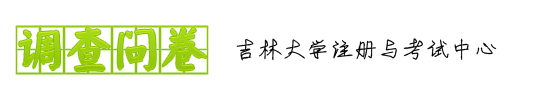
<style>
.page{position:relative;width:535px;height:100px;background:#ffffff}
.page>*{position:absolute;margin:0}
.t1{font:48px "YankaigungEG-Ultra-GB";color:#9fd20f}
.t2{font:24px "SheideEG-Medium-GB";color:#010000}
</style>
<div class="page">
<p class="t1" style="left:16px;top:26px;width:192px;height:48px">调查问卷</p>
<p class="t2" style="left:236px;top:38px;width:261px;height:23px">吉林大学注册与考试中心</p>
</div>
